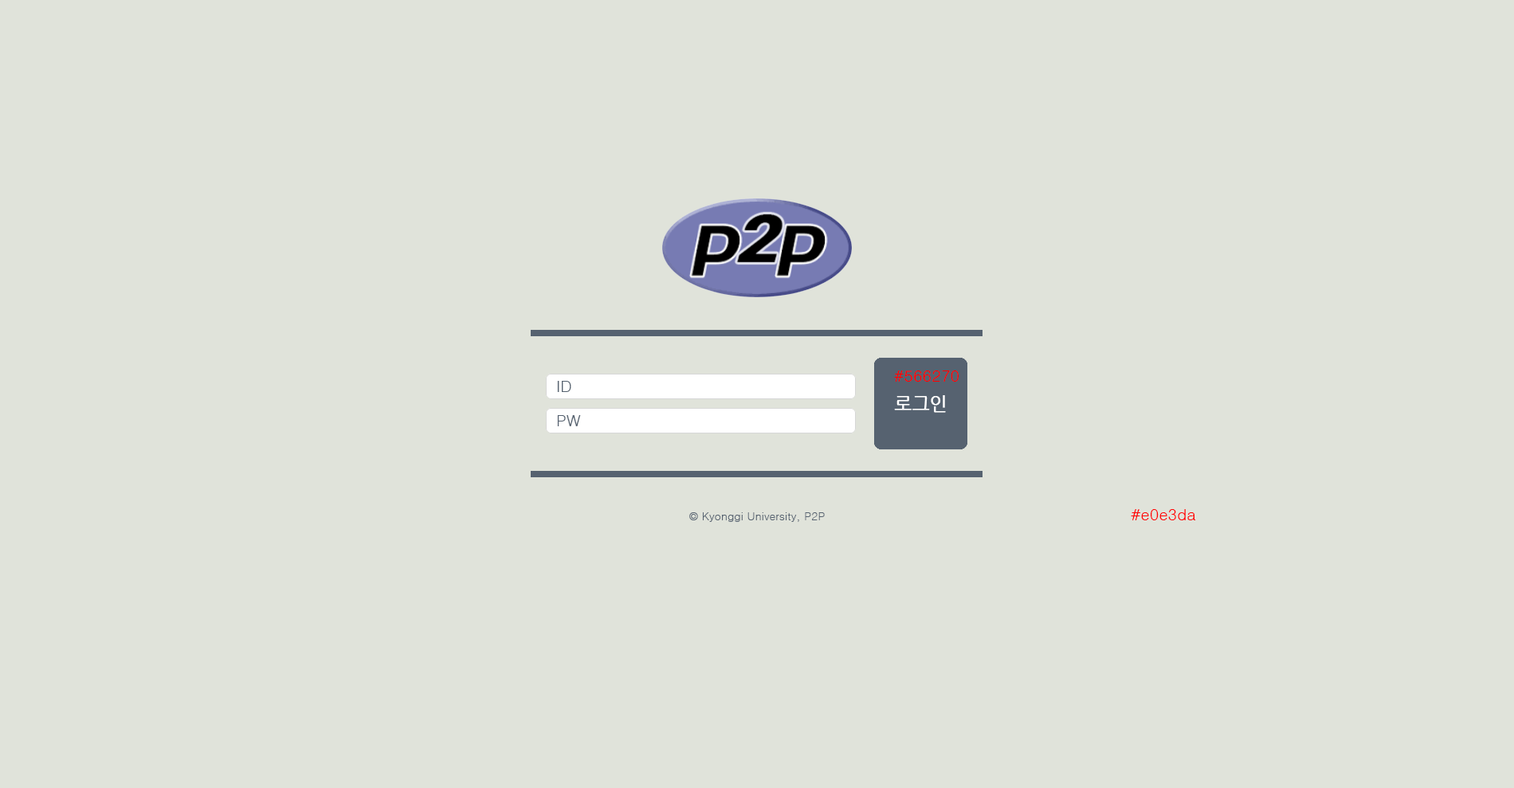
<style>
.page{position:relative;width:1514px;height:788px;background:#e0e3da}
.page>*{position:absolute;margin:0}
.t1{font:15.9px "Dotum";color:#ff0000}
.t2{font:15.9px "Dotum";color:#566270}
.t3{font:18.3px "NanumGothic";color:#ffffff;font-weight:bold}
.t4{font:11.2px "Dotum";color:#566270}
</style>
<div class="page">
<p class="t1" style="left:894px;top:370px;width:64px;height:12px">#566270</p>
<p class="t2" style="left:557px;top:381px;width:14px;height:11px">ID</p>
<p class="t3" style="left:894px;top:395px;width:52px;height:18px">로그인</p>
<p class="t2" style="left:557px;top:415px;width:24px;height:11px">PW</p>
<p class="t1" style="left:1130px;top:509px;width:66px;height:11px">#e0e3da</p>
<p class="t4" style="left:689px;top:512px;width:135px;height:10px">© Kyonggi University, P2P</p>
</div>
